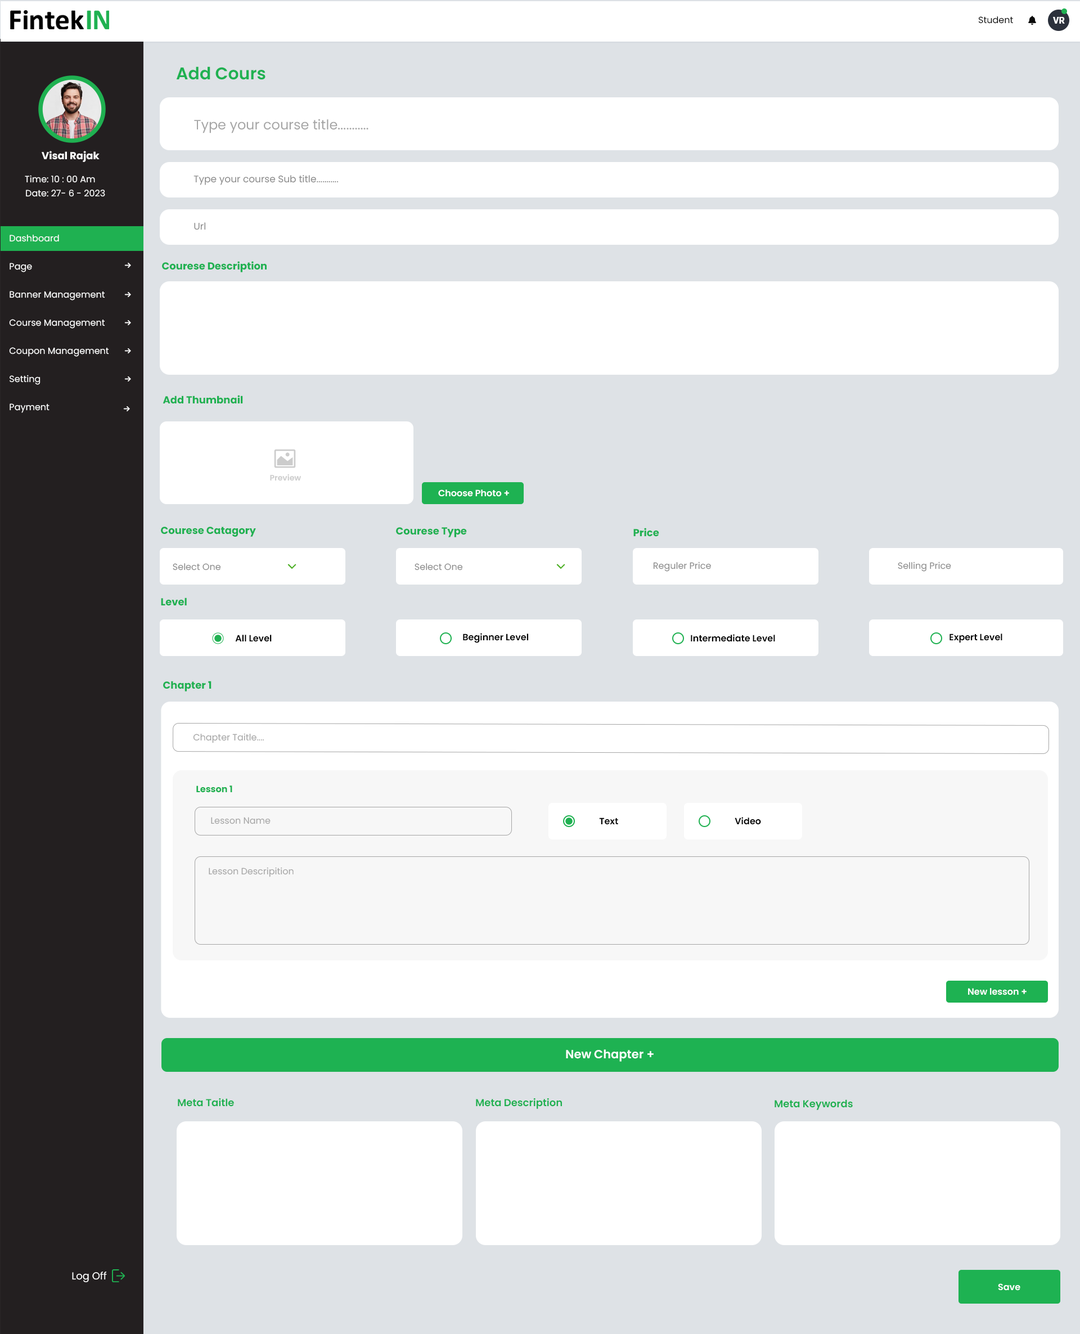
<style>
.page{position:relative;width:1080px;height:1334px;background:#ffffff}
.page>*{position:absolute;margin:0}
.t1{font:9px "Poppins-Regular";color:#0a0a0a}
.t2{font:9px "Roboto-Black";color:#ffffff}
.t3{font:16.9px "Poppins-SemiBold";color:#1fb151}
.t4{font:13.5px "Poppins-Regular";color:#a5a5a5}
.t5{font:10.1px "Poppins-Bold";color:#ffffff}
.t6{font:9px "Poppins-Regular";color:#ffffff}
.t7{font:9.6px "Poppins-Regular";color:#8a8a8a}
.t8{font:9px/28.1px "Poppins-Regular";color:#ffffff}
.t9{font:10.1px "Poppins-Bold";color:#1fb151}
.t10{font:7.9px "Poppins-SemiBold";color:#cccccc}
.t11{font:9px "Poppins-SemiBold";color:#ffffff}
.t12{font:9px "Poppins-Regular";color:#8a8a8a}
.t13{font:9px "Poppins-SemiBold";color:#000000}
.t14{font:9px "Poppins-Regular";color:#a5a5a5}
.t15{font:9px "Poppins-Bold";color:#1fb151}
.t16{font:11.8px "Poppins-SemiBold";color:#ffffff}
.t17{font:10.1px "Poppins-SemiBold";color:#1fb151}
.t18{font:10.1px "Poppins-Regular";color:#ffffff}
</style>
<div class="page">
<p class="t1" style="left:978px;top:16px;width:35px;height:8px">Student</p>
<p class="t2" style="left:1053px;top:17px;width:12px;height:7px">VR</p>
<p class="t3" style="left:176px;top:66px;width:90px;height:14px">Add Cours</p>
<p class="t4" style="left:194px;top:119px;width:174px;height:14px">Type your course title...........</p>
<p class="t5" style="left:42px;top:151px;width:58px;height:11px">Visal Rajak</p>
<p class="t6" style="left:25px;top:175px;width:70px;height:8px">Time: 10 : 00 Am</p>
<p class="t7" style="left:194px;top:175px;width:144px;height:10px">Type your course Sub title...........</p>
<p class="t6" style="left:26px;top:190px;width:79px;height:7px">Date: 27- 6 - 2023</p>
<p class="t7" style="left:194px;top:222px;width:12px;height:8px">Url</p>
<p class="t8" style="left:9px;top:235px;width:100px;height:178px">Dashboard<br>Page<br>Banner Management<br>Course Management<br>Coupon Management<br>Setting<br>Payment</p>
<p class="t9" style="left:162px;top:261px;width:105px;height:11px">Courese Description</p>
<p class="t9" style="left:163px;top:395px;width:80px;height:9px">Add Thumbnail</p>
<p class="t10" style="left:270px;top:474px;width:31px;height:7px">Preview</p>
<p class="t11" style="left:438px;top:489px;width:71px;height:8px">Choose Photo +</p>
<p class="t9" style="left:161px;top:526px;width:95px;height:11px">Courese Catagory</p>
<p class="t9" style="left:396px;top:527px;width:71px;height:10px">Courese Type</p>
<p class="t9" style="left:633px;top:528px;width:26px;height:9px">Price</p>
<p class="t12" style="left:173px;top:563px;width:48px;height:7px">Select One</p>
<p class="t12" style="left:415px;top:563px;width:48px;height:7px">Select One</p>
<p class="t12" style="left:653px;top:561px;width:58px;height:11px">Reguler Price</p>
<p class="t12" style="left:898px;top:561px;width:53px;height:11px">Selling Price</p>
<p class="t9" style="left:161px;top:597px;width:26px;height:9px">Level</p>
<p class="t13" style="left:235px;top:634px;width:37px;height:8px">All Level</p>
<p class="t13" style="left:463px;top:633px;width:65px;height:10px">Beginner Level</p>
<p class="t13" style="left:691px;top:634px;width:84px;height:8px">Intermediate Level</p>
<p class="t13" style="left:950px;top:633px;width:52px;height:10px">Expert Level</p>
<p class="t9" style="left:163px;top:681px;width:49px;height:10px">Chapter 1</p>
<p class="t14" style="left:193px;top:733px;width:71px;height:10px">Chapter Taitle....</p>
<p class="t15" style="left:196px;top:785px;width:36px;height:8px">Lesson 1</p>
<p class="t14" style="left:211px;top:817px;width:60px;height:7px">Lesson Name</p>
<p class="t13" style="left:599px;top:817px;width:19px;height:8px">Text</p>
<p class="t13" style="left:735px;top:817px;width:26px;height:8px">Video</p>
<p class="t14" style="left:209px;top:867px;width:85px;height:10px">Lesson Descripition</p>
<p class="t11" style="left:968px;top:988px;width:59px;height:7px">New lesson +</p>
<p class="t16" style="left:566px;top:1049px;width:88px;height:12px">New Chapter +</p>
<p class="t17" style="left:178px;top:1098px;width:56px;height:8px">Meta Taitle</p>
<p class="t17" style="left:476px;top:1098px;width:86px;height:11px">Meta Description</p>
<p class="t17" style="left:775px;top:1099px;width:78px;height:11px">Meta Keywords</p>
<p class="t18" style="left:72px;top:1271px;width:35px;height:11px">Log Off</p>
<p class="t11" style="left:998px;top:1283px;width:22px;height:7px">Save</p>
</div>
